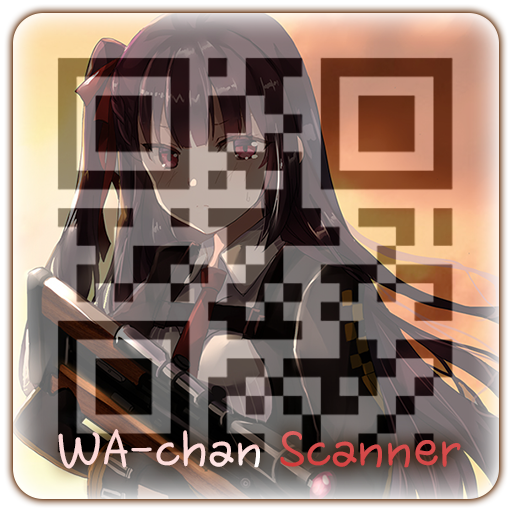
<style>
.page{position:relative;width:512px;height:512px}
.page>*{position:absolute;margin:0}
.t1{font:60px "HoonWcatR"}
</style>
<div class="page">
<p class="t1" style="left:58px;top:429px;width:403px;height:40px">WA-chan Scanner</p>
</div>
